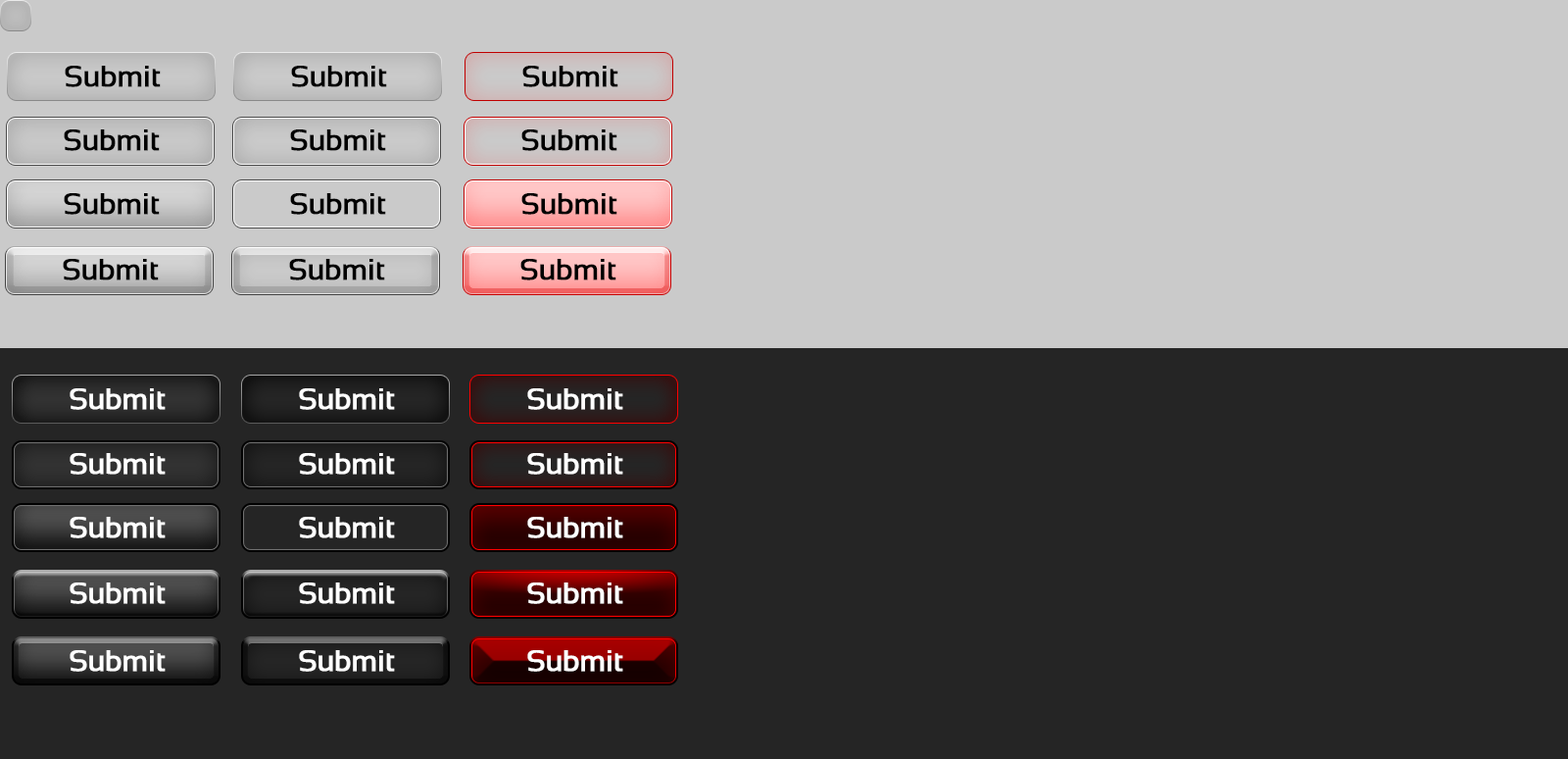
<style>
.page{position:relative;width:1568px;height:759px;background:#252525}
.page>*{position:absolute;margin:0}
.t1{font:29.4px "Sansation-Regular";letter-spacing:-0.025em;color:#000000;font-weight:bold}
.t2{font:29.4px "Sansation-Regular";letter-spacing:-0.025em;color:#ffffff;font-weight:bold}
</style>
<div class="page">
<p class="t1" style="left:65px;top:66px;width:96px;height:21px">Submit</p>
<p class="t1" style="left:291px;top:66px;width:96px;height:21px">Submit</p>
<p class="t1" style="left:522px;top:66px;width:96px;height:21px">Submit</p>
<p class="t1" style="left:64px;top:129px;width:96px;height:22px">Submit</p>
<p class="t1" style="left:290px;top:129px;width:96px;height:22px">Submit</p>
<p class="t1" style="left:521px;top:129px;width:96px;height:22px">Submit</p>
<p class="t1" style="left:64px;top:193px;width:96px;height:22px">Submit</p>
<p class="t1" style="left:290px;top:193px;width:96px;height:22px">Submit</p>
<p class="t1" style="left:521px;top:193px;width:96px;height:22px">Submit</p>
<p class="t1" style="left:63px;top:259px;width:96px;height:21px">Submit</p>
<p class="t1" style="left:289px;top:259px;width:96px;height:21px">Submit</p>
<p class="t1" style="left:520px;top:259px;width:96px;height:21px">Submit</p>
<p class="t2" style="left:70px;top:388px;width:96px;height:22px">Submit</p>
<p class="t2" style="left:299px;top:388px;width:96px;height:22px">Submit</p>
<p class="t2" style="left:527px;top:388px;width:96px;height:22px">Submit</p>
<p class="t2" style="left:70px;top:453px;width:96px;height:21px">Submit</p>
<p class="t2" style="left:299px;top:453px;width:96px;height:21px">Submit</p>
<p class="t2" style="left:527px;top:453px;width:96px;height:21px">Submit</p>
<p class="t2" style="left:70px;top:516px;width:96px;height:22px">Submit</p>
<p class="t2" style="left:299px;top:516px;width:96px;height:22px">Submit</p>
<p class="t2" style="left:527px;top:516px;width:96px;height:22px">Submit</p>
<p class="t2" style="left:70px;top:582px;width:96px;height:22px">Submit</p>
<p class="t2" style="left:299px;top:582px;width:96px;height:22px">Submit</p>
<p class="t2" style="left:527px;top:582px;width:96px;height:22px">Submit</p>
<p class="t2" style="left:70px;top:650px;width:96px;height:21px">Submit</p>
<p class="t2" style="left:299px;top:650px;width:96px;height:21px">Submit</p>
<p class="t2" style="left:527px;top:650px;width:96px;height:21px">Submit</p>
</div>
